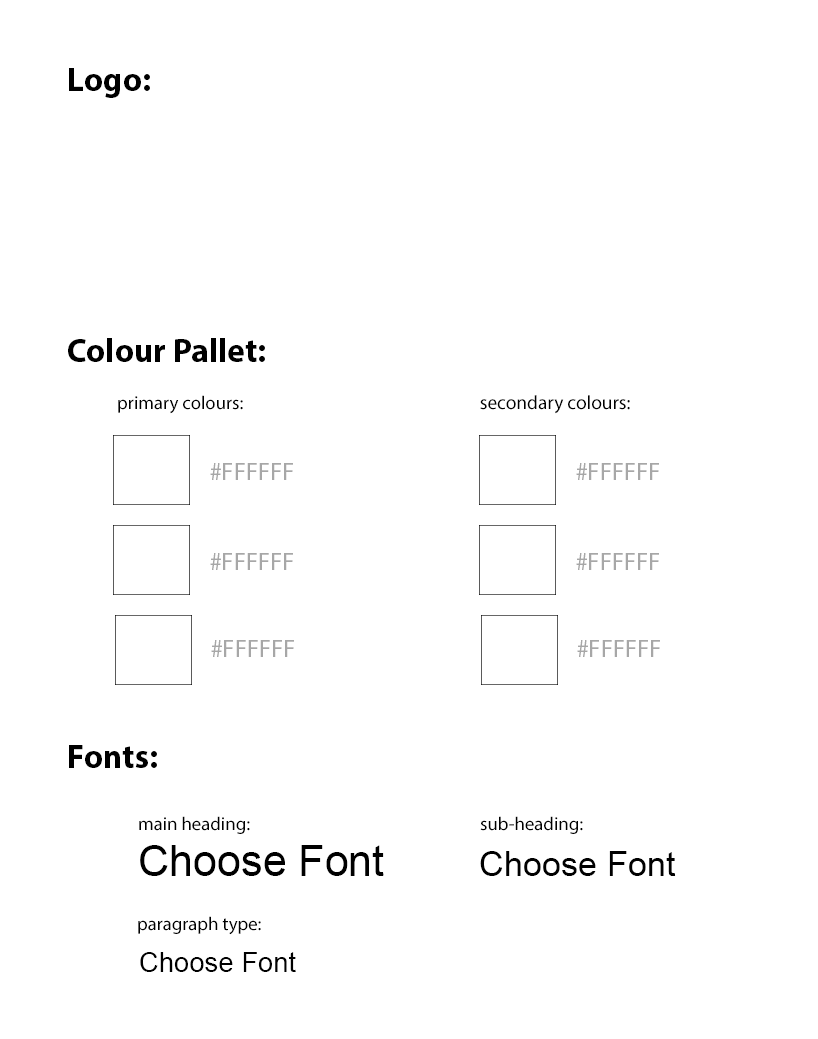
<style>
.page{position:relative;width:818px;height:1039px;background:#ffffff}
.page>*{position:absolute;margin:0}
.t1{font:33.3px "MyriadPro-Bold";color:#000000}
.t2{font:18.7px "MyriadPro-Regular";color:#000000}
.t3{font:19.4px "MyriadPro-Regular";color:#000000}
.t4{font:25px "MyriadPro-Regular";color:#a7a7a7}
.t5{font:42.9px "ArialMT";color:#000000}
.t6{font:34.3px "ArialMT";color:#000000}
.t7{font:27.9px "ArialMT";color:#000000}
</style>
<div class="page">
<p class="t1" style="left:69px;top:68px;width:81px;height:30px">Logo:</p>
<p class="t1" style="left:68px;top:338px;width:197px;height:24px">Colour Pallet:</p>
<p class="t2" style="left:118px;top:395px;width:125px;height:19px">primary colours:</p>
<p class="t3" style="left:480px;top:395px;width:150px;height:19px">secondary colours:</p>
<p class="t4" style="left:210px;top:463px;width:83px;height:17px">#FFFFFF</p>
<p class="t4" style="left:576px;top:463px;width:83px;height:17px">#FFFFFF</p>
<p class="t4" style="left:210px;top:553px;width:83px;height:17px">#FFFFFF</p>
<p class="t4" style="left:576px;top:553px;width:83px;height:17px">#FFFFFF</p>
<p class="t4" style="left:211px;top:640px;width:83px;height:17px">#FFFFFF</p>
<p class="t4" style="left:577px;top:640px;width:83px;height:17px">#FFFFFF</p>
<p class="t1" style="left:69px;top:745px;width:88px;height:23px">Fonts:</p>
<p class="t2" style="left:139px;top:816px;width:111px;height:18px">main heading:</p>
<p class="t2" style="left:480px;top:816px;width:103px;height:18px">sub-heading:</p>
<p class="t5" style="left:140px;top:845px;width:244px;height:31px">Choose Font</p>
<p class="t6" style="left:480px;top:851px;width:196px;height:25px">Choose Font</p>
<p class="t2" style="left:138px;top:916px;width:123px;height:19px">paragraph type:</p>
<p class="t7" style="left:140px;top:952px;width:156px;height:20px">Choose Font</p>
</div>
